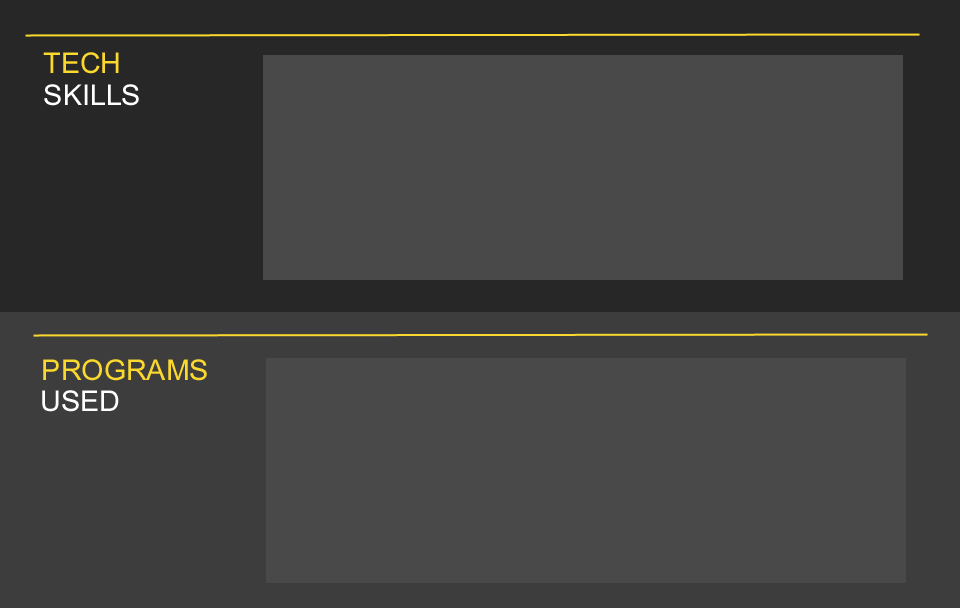
<style>
.page{position:relative;width:960px;height:608px;background:#494949}
.page>*{position:absolute;margin:0}
.t1{font:40px "Utsaah";color:#fbd82d}
.t2{font:40px "Utsaah";color:#ffffff}
</style>
<div class="page">
<p class="t1" style="left:43px;top:52px;width:76px;height:22px">TECH</p>
<p class="t2" style="left:44px;top:84px;width:95px;height:22px">SKILLS</p>
<p class="t1" style="left:43px;top:359px;width:164px;height:22px">PROGRAMS</p>
<p class="t2" style="left:42px;top:390px;width:77px;height:22px">USED</p>
</div>
